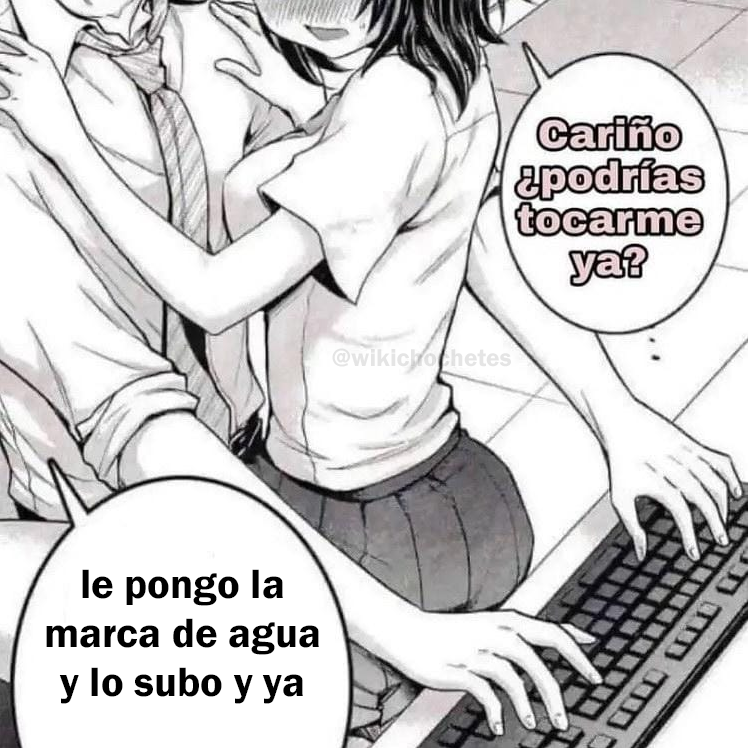
<style>
.page{position:relative;width:748px;height:748px;background:#ffffff}
.page>*{position:absolute;margin:0}
.t1{font:25.3px "FranklinGothic-Demi";color:#e5e5e5}
.t2{font:42.5px "FranklinGothic-Demi";color:#000000}
</style>
<div class="page">
<p class="t1" style="left:332px;top:348px;width:179px;height:19px">@wikichochetes</p>
<p class="t2" style="left:46px;top:569px;width:273px;height:135px;text-align:center">le pongo la<br>marca de agua<br>y lo subo y ya</p>
</div>
